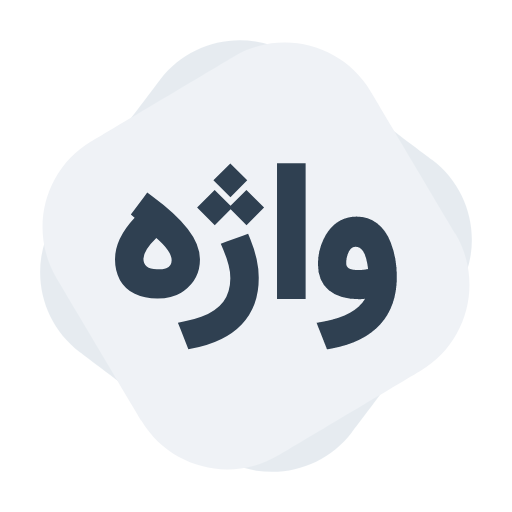
<style>
.page{position:relative;width:512px;height:512px;background:#ffffff}
.page>*{position:absolute;margin:0}
.t1{font:200px "Vazir-Black";color:#2f4051}
</style>
<div class="page">
<p class="t1" style="left:115px;top:163px;width:282px;height:187px">واژه</p>
</div>
